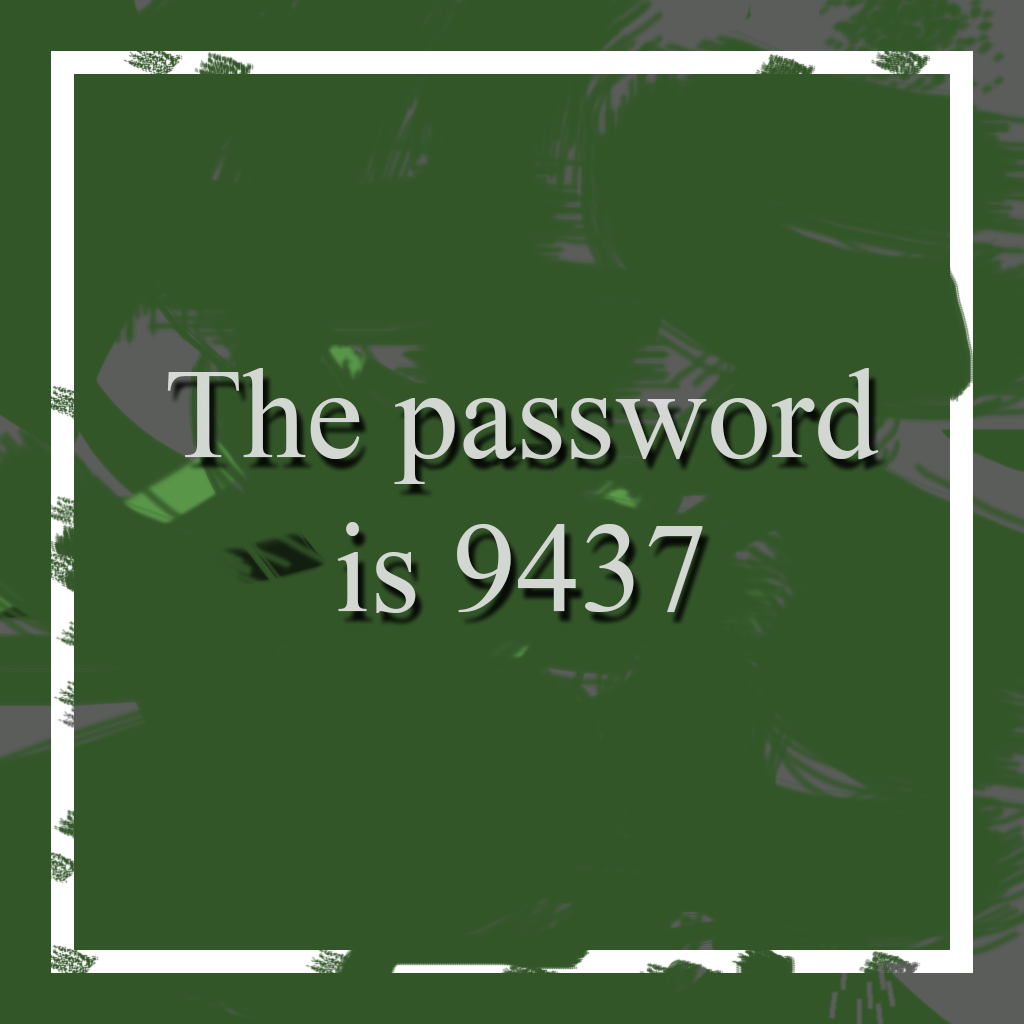
<style>
.page{position:relative;width:1024px;height:1024px;background:#335629}
.page>*{position:absolute;margin:0}
.t1{font:127.9px "TimesNewRomanPSMT";color:#d2d7d1}
</style>
<div class="page">
<p class="t1" style="left:167px;top:368px;width:712px;height:245px;text-align:center">The password is 9437</p>
</div>
